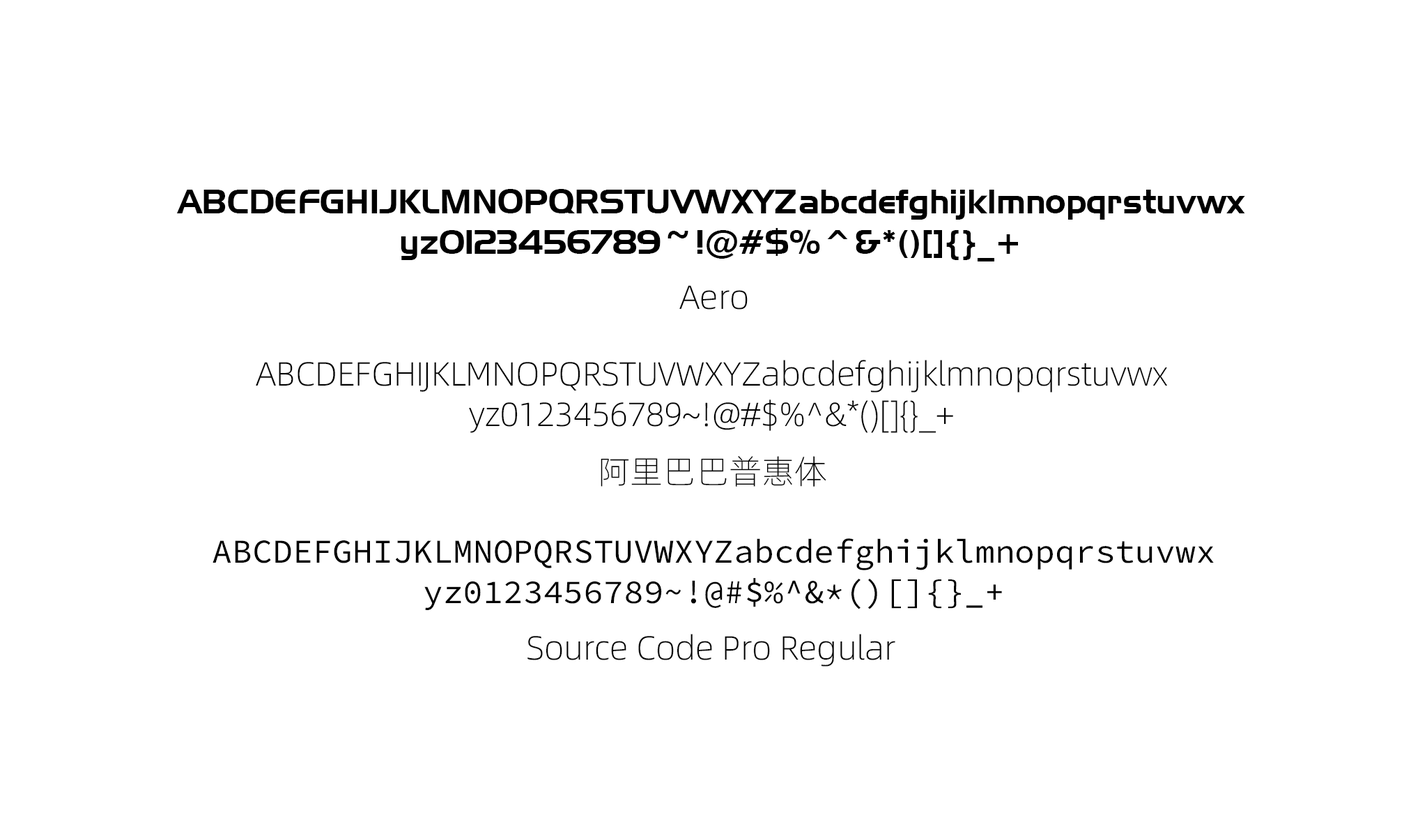
<style>
.page{position:relative;width:1427px;height:836px;background:#ffffff}
.page>*{position:absolute;margin:0}
.t1{font:33.4px "AeroRegularSWFTE";color:#000000}
.t2{font:33.4px "Alibaba-PuHuiTi-L";color:#000000}
.t3{font:33.4px "SourceCodeVariable-Roman";color:#000000}
</style>
<div class="page">
<p class="t1" style="left:176px;top:189px;width:1069px;height:72px;text-align:center">ABCDEFGHIJKLMNOPQRSTUVWXYZabcdefghijklmnopqrstuvwx<br>yz0123456789~!@#$%^&amp;*()[]{}_+</p>
<p class="t2" style="left:679px;top:285px;width:69px;height:24px">Aero</p>
<p class="t2" style="left:256px;top:360px;width:911px;height:73px;text-align:center">ABCDEFGHIJKLMNOPQRSTUVWXYZabcdefghijklmnopqrstuvwx<br>yz0123456789~!@#$%^&amp;*()[]{}_+</p>
<p class="t2" style="left:601px;top:456px;width:225px;height:30px">阿里巴巴普惠体</p>
<p class="t3" style="left:213px;top:538px;width:1001px;height:72px;text-align:center">ABCDEFGHIJKLMNOPQRSTUVWXYZabcdefghijklmnopqrstuvwx<br>yz0123456789~!@#$%^&amp;*()[]{}_+</p>
<p class="t2" style="left:528px;top:633px;width:367px;height:33px">Source Code Pro Regular</p>
</div>
